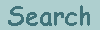
<style>
.page{position:relative;width:100px;height:30px;background:#aecfcf}
.page>*{position:absolute;margin:0}
.t1{font:25px "ComicSansMS-Bold";color:#42737a}
</style>
<div class="page">
<p class="t1" style="left:8px;top:5px;width:82px;height:21px">Search</p>
</div>
